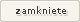
<style>
.page{position:relative;width:80px;height:22px;background:#f6f4ed}
.page>*{position:absolute;margin:0}
.t1{font:9px "Verdana";color:#383838}
.t2{font:9px "Verdana-Bold";color:#383838}
</style>
<div class="page">
<p class="t1" style="left:16px;top:6px;width:50px;height:8px"><span class="t2">z</span>amkniete</p>
</div>
